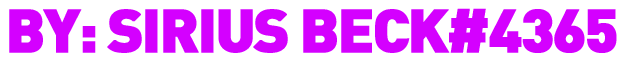
<style>
.page{position:relative;width:622px;height:62px;background:#ffffff}
.page>*{position:absolute;margin:0}
.t1{font:60px "DIN-Black";letter-spacing:-0.05em;color:#d400ff;text-transform:uppercase;font-weight:bold}
</style>
<div class="page">
<p class="t1" style="left:9px;top:8px;width:608px;height:45px">by: Sirius Beck#4365</p>
</div>
